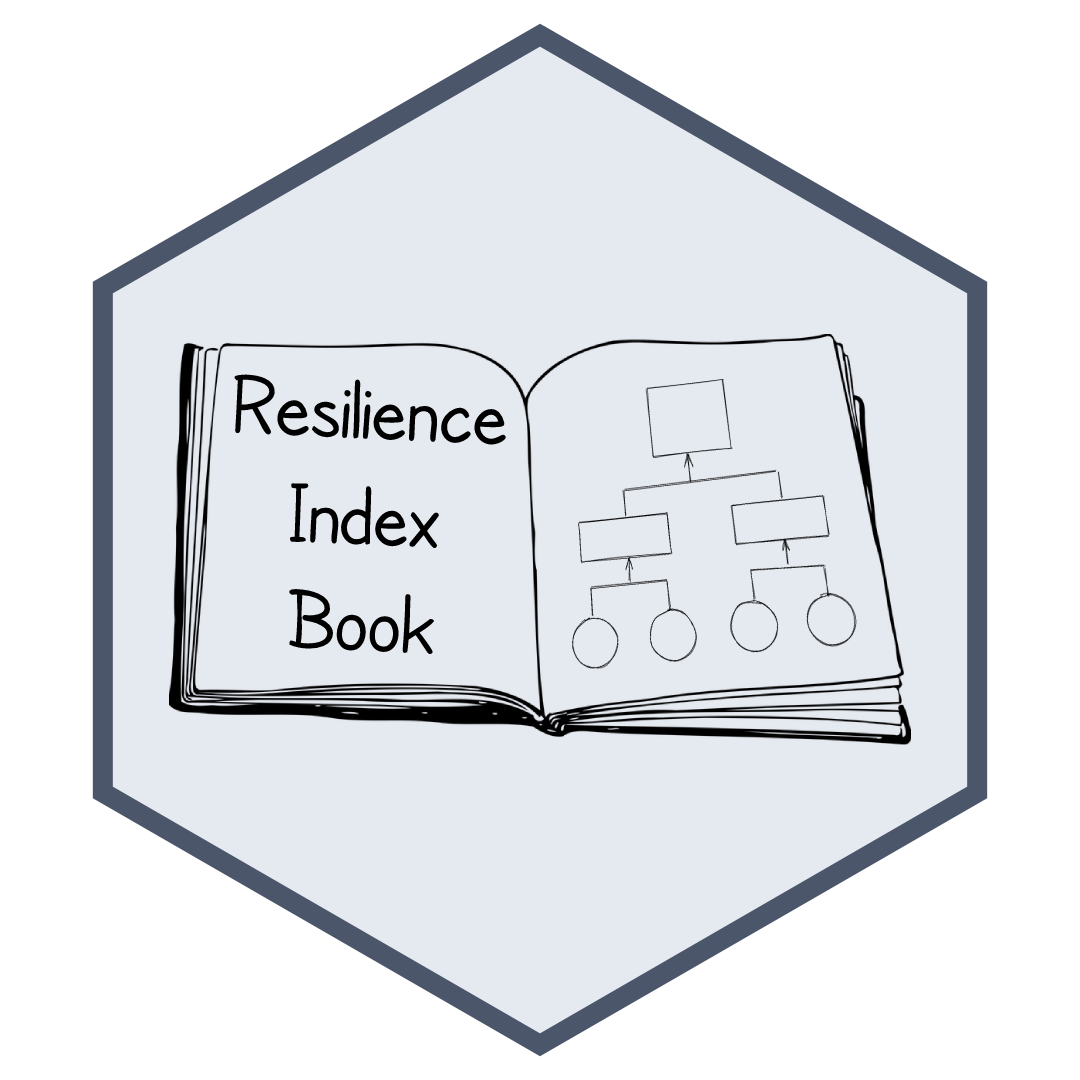
<style>
.page{position:relative;width:1080px;height:1080px;background:#e5e9f0}
.page>*{position:absolute;margin:0}
.t1{font:88.3px "SFCartoonistHand";color:#000000}
</style>
<div class="page">
<p class="t1" style="left:234px;top:374px;width:272px;height:280px;text-align:center;rotate:3deg">Resilience<br>Index<br>Book</p>
</div>
